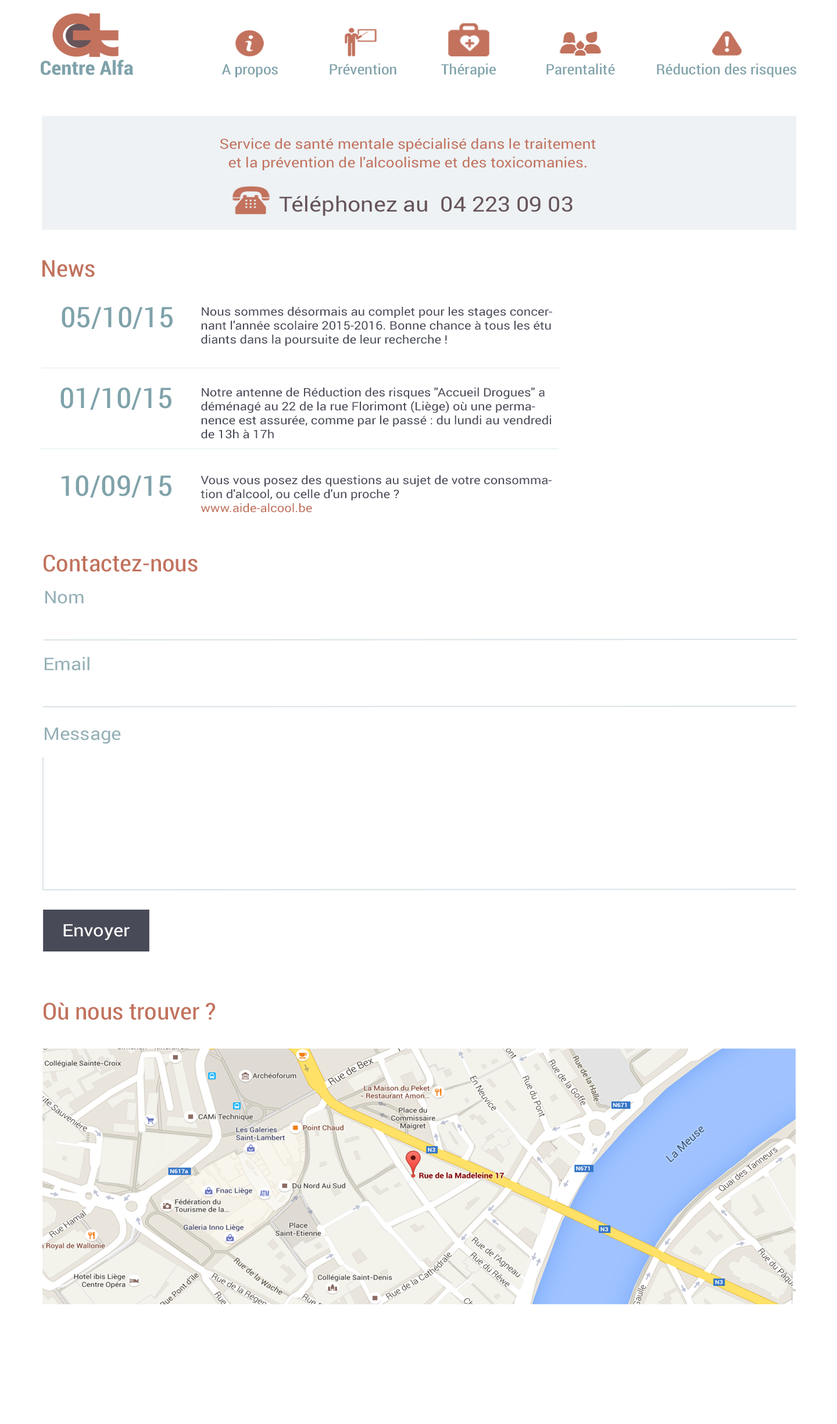
<style>
.page{position:relative;width:837px;height:1424px;background:#ffffff}
.page>*{position:absolute;margin:0}
.t1{font:14.5px "RobotoCondensed-Regular";color:#7fa2aa;scale:1.14 1}
.t2{font:14px "Roboto-Regular";color:#c2725d;scale:1.1 1}
.t3{font:15.4px "RobotoCondensed-Regular";color:#c2725d;scale:1.1 1}
.t4{font:20.9px "Roboto-Regular";color:#67545a;scale:1.1 1}
.t5{font:23.2px "RobotoCondensed-Regular";color:#c2725d;scale:1.1 1}
.t6{font:28.4px "RobotoCondensed-Regular";color:#7fa2aa;scale:1.11 1}
.t7{font:11.6px "Roboto-Regular";color:#484a57;scale:1.1 1}
.t8{font:11.6px "Roboto-Regular";color:#c2725d;scale:1.1 1}
.t9{font:17.4px "Roboto-Regular";color:#94b0b7;scale:1.1 1}
.t10{font:17px "Roboto-Regular";color:#ffffff;scale:1.11 1}
</style>
<div class="page">
<p class="t1" style="left:222px;top:64px;width:56px;height:13px">A propos</p>
<p class="t1" style="left:330px;top:63px;width:66px;height:12px">Prévention</p>
<p class="t1" style="left:441px;top:63px;width:55px;height:14px">Thérapie</p>
<p class="t1" style="left:546px;top:63px;width:69px;height:12px">Parentalité</p>
<p class="t1" style="left:657px;top:63px;width:139px;height:14px">Réduction des risques</p>
<p class="t2" style="left:220px;top:138px;width:376px;height:32px;text-align:center">Service de santé mentale spécialisé dans le traitement et la prévention de l'alcoolisme et des toxicomanies<span class="t3">.</span></p>
<p class="t4" style="left:279px;top:195px;width:294px;height:21px">Téléphonez au  04 223 09 03</p>
<p class="t5" style="left:42px;top:260px;width:53px;height:17px">News</p>
<p class="t6" style="left:62px;top:306px;width:111px;height:23px">05/10/15</p>
<p class="t7" style="left:201px;top:306px;width:351px;height:40px">Nous sommes désormais au complet pour les stages concernant l'année scolaire 2015-2016. Bonne chance à tous les étu<br>diants dans la poursuite de leur recherche !</p>
<p class="t6" style="left:60px;top:387px;width:112px;height:23px">01/10/15</p>
<p class="t7" style="left:201px;top:387px;width:350px;height:52px">Notre antenne de Réduction des risques "Accueil Drogues" a déménagé au 22 de la rue Florimont (Liège) où une permanence est assurée, comme par le passé : du lundi au vendredi de 13h à 17h</p>
<p class="t6" style="left:61px;top:475px;width:111px;height:23px">10/09/15</p>
<p class="t7" style="left:201px;top:475px;width:351px;height:38px">Vous vous posez des questions au sujet de votre consommation d'alcool, ou celle d'un proche ?<br><span class="t8">www.aide-alcool.be</span></p>
<p class="t5" style="left:44px;top:555px;width:154px;height:17px">Contactez-nous</p>
<p class="t9" style="left:45px;top:591px;width:39px;height:13px">Nom</p>
<p class="t9" style="left:45px;top:657px;width:45px;height:14px">Email</p>
<p class="t9" style="left:45px;top:727px;width:76px;height:17px">Message</p>
<p class="t10" style="left:63px;top:924px;width:67px;height:17px">Envoyer</p>
<p class="t5" style="left:44px;top:1003px;width:171px;height:17px">Où nous trouver ?</p>
</div>
